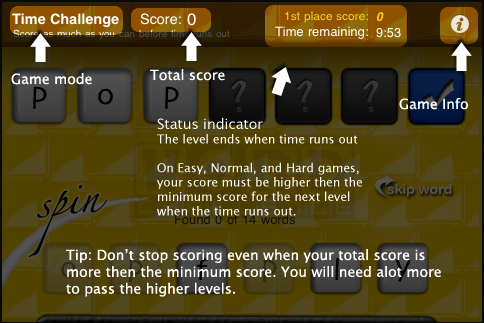
<style>
.page{position:relative;width:484px;height:323px}
.page>*{position:absolute;margin:0}
.t1{font:14px "LucidaGrande";color:#ffffff}
.t2{font:12px "LucidaGrande";color:#ffffff}
</style>
<div class="page">
<p class="t1" style="left:11px;top:73px;width:81px;height:12px">Game mode</p>
<p class="t1" style="left:150px;top:69px;width:75px;height:12px">Total score</p>
<p class="t1" style="left:399px;top:98px;width:69px;height:12px">Game Info</p>
<p class="t2" style="left:157px;top:118px;width:205px;height:98px"><span class="t1">Status indicator<br></span>The level ends when time runs out<br><br>On Easy, Normal, and Hard games,<br>your score must be higher then the<br>minimum score for the next level<br>when the time runs out.</p>
<p class="t1" style="left:66px;top:249px;width:375px;height:48px">Tip: Don’t stop scoring even when your total score is<br>more then the minimum score. You will need alot more<br>to pass the higher levels.</p>
</div>
